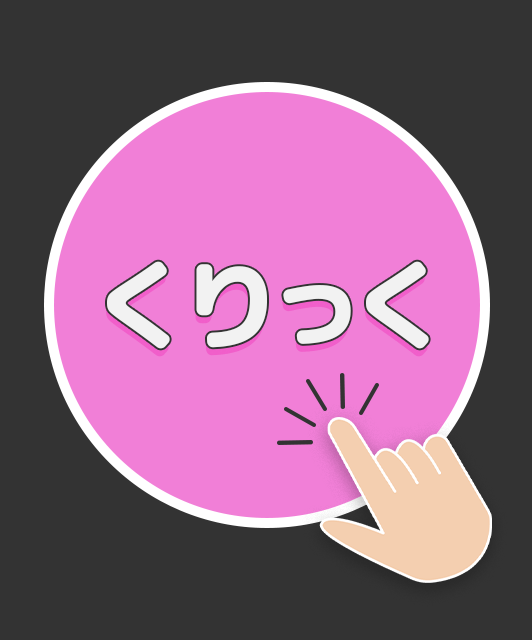
<style>
.page{position:relative;width:532px;height:640px;background:#333333}
.page>*{position:absolute;margin:0}
.t1{font:100.4px "RoundedMplus1c-ExtraBold";letter-spacing:-0.14em;color:#f2f2f2}
</style>
<div class="page">
<p class="t1" style="left:107px;top:261px;width:322px;height:88px">くりっく</p>
</div>
